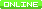
<style>
.page{position:relative;width:42px;height:9px;background:#73ff32}
.page>*{position:absolute;margin:0}
.t1{font:8px "5x5-Pixel";color:#ffffff}
</style>
<div class="page">
<p class="t1" style="left:4px;top:2px;width:34px;height:5px">online</p>
</div>
